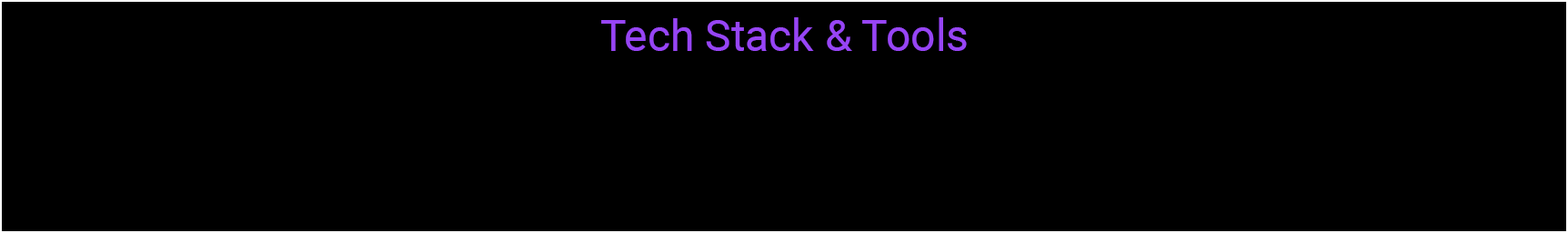
<style>
.page{position:relative;width:1568px;height:233px;background:#000000}
.page>*{position:absolute;margin:0}
.t1{font:43.7px "Roboto-Regular";color:#9745f5}
</style>
<div class="page">
<p class="t1" style="left:601px;top:17px;width:366px;height:34px">Tech Stack &amp; Tools</p>
</div>
